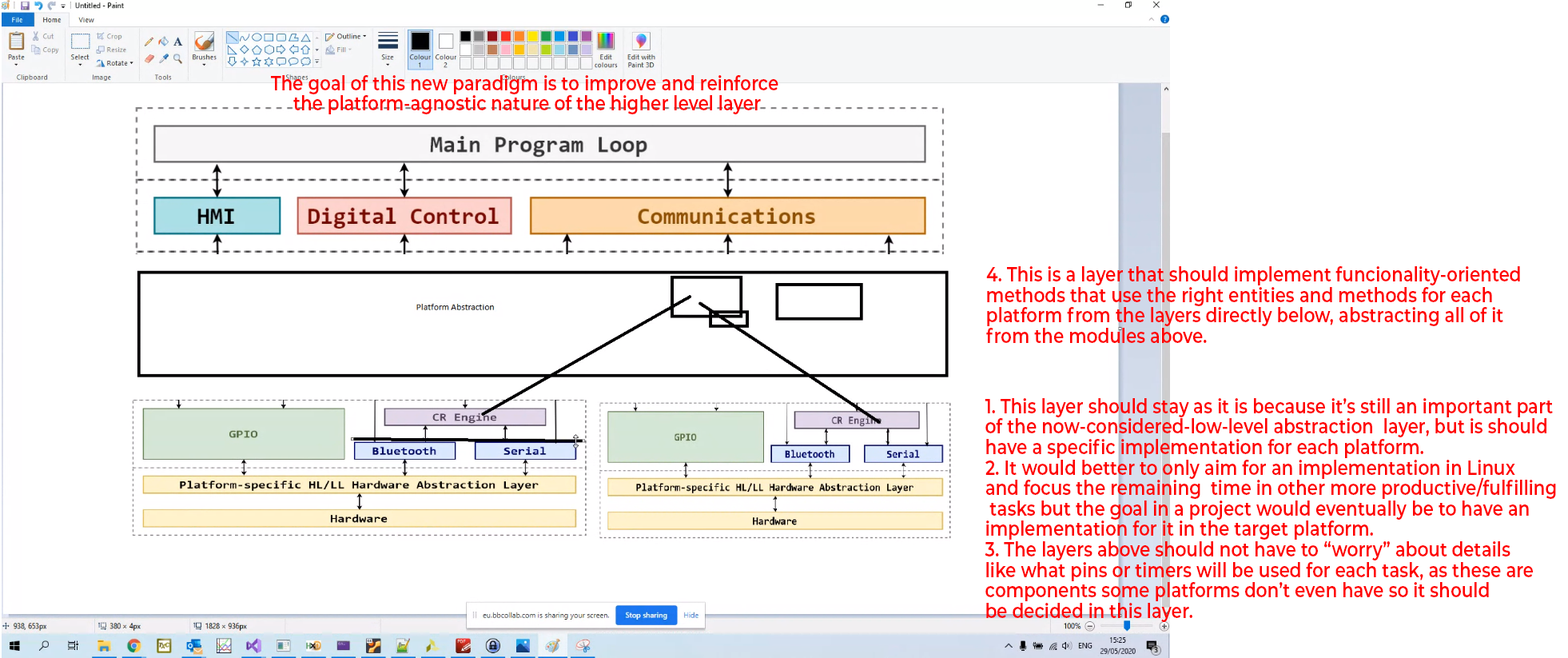
<style>
.page{position:relative;width:1568px;height:658px;background:#ffffff}
.page>*{position:absolute;margin:0}
.t1{font:19.6px "Montserrat-SemiBold";color:#ff0000;scale:0.87 1}
</style>
<div class="page">
<p class="t1" style="left:271px;top:75px;width:507px;height:39px;text-align:center">The goal of this new paradigm is to improve and reinforce <br>the platform-agnostic nature of the higher level layer</p>
<p class="t1" style="left:986px;top:266px;width:534px;height:77px">4. This is a layer that should implement funcionality-oriented <br>methods that use the right entities and methods for each <br>platform from the layers directly below, abstracting all of it <br>from the modules above.</p>
<p class="t1" style="left:985px;top:398px;width:571px;height:224px">1. This layer should stay as it is because it’s still an important part <br>of the now-considered-low-level abstraction  layer, but is should <br>have a specific implementation for each platform.<br>2. It would better to only aim for an implementation in Linux<br>and focus the remaining  time in other more productive/fulfilling<br> tasks but the goal in a project would eventually be to have an <br>implementation for it in the target platform.<br>3. The layers above should not have to “worry” about details <br>like what pins or timers will be used for each task, as these are <br>components some platforms don’t even have so it should <br>be decided in this layer.</p>
</div>
